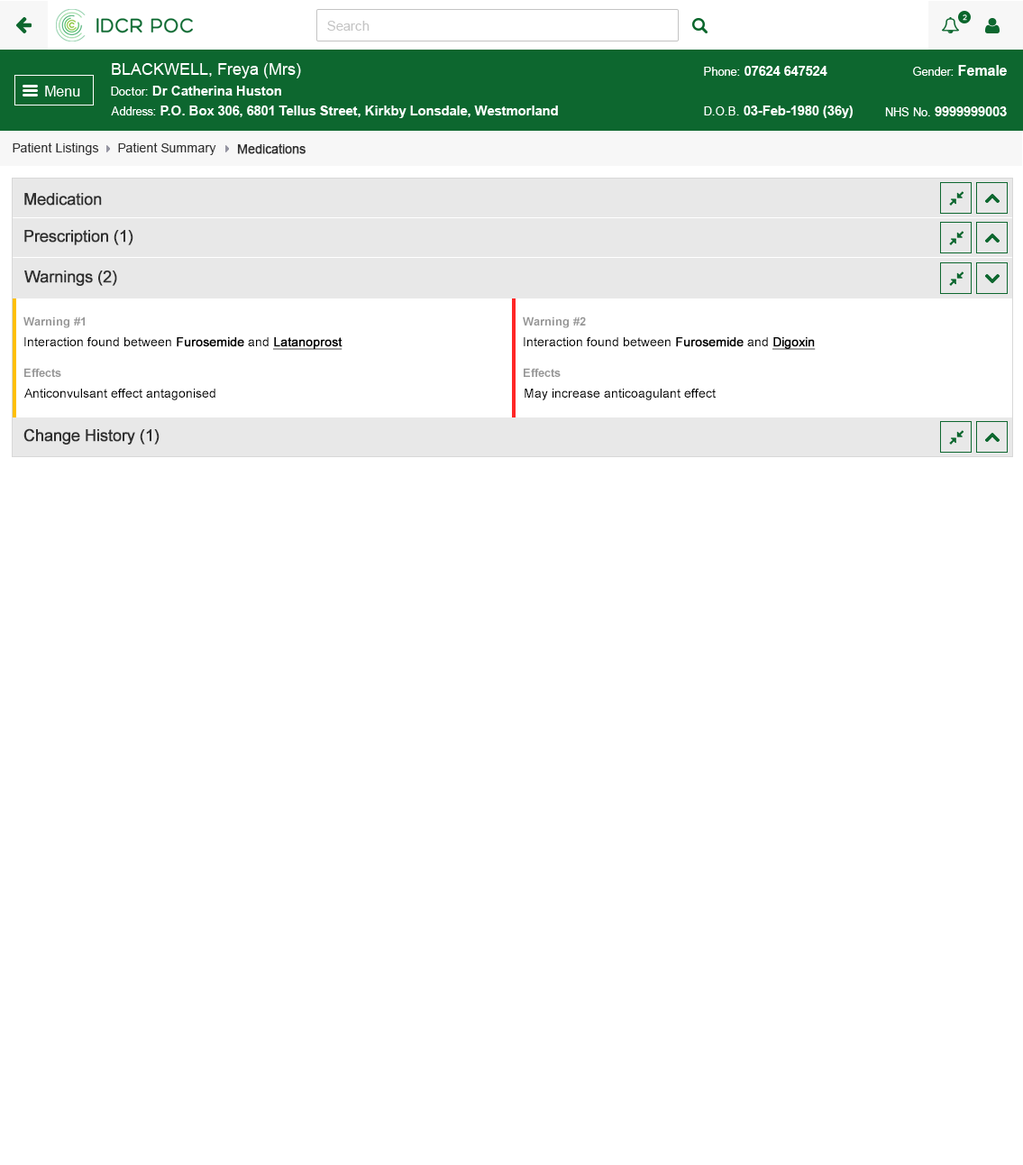
<style>
.page{position:relative;width:1023px;height:1165px;background:#ffffff}
.page>*{position:absolute;margin:0}
.t1{font:12.6px "ArialMT";color:#313131}
.t2{font:12.6px "ArialMT";color:#313131;font-weight:bold}
.t3{font:16.2px "ArialMT";color:#303030;font-weight:bold}
.t4{font:11.7px "Arial-BoldMT";color:#959595}
.t5{font:12.6px "ArialMT";color:#000000}
.t6{font:12.6px "ArialMT";color:#000000;font-weight:bold}
.t7{font:12.6px "ArialMT";color:#000000;font-weight:bold;text-decoration:underline}
</style>
<div class="page">
<p class="t1" style="left:13px;top:142px;width:86px;height:13px">Patient Listings</p>
<p class="t1" style="left:118px;top:142px;width:98px;height:13px">Patient Summary</p>
<p class="t2" style="left:237px;top:143px;width:69px;height:11px">Medications</p>
<p class="t3" style="left:24px;top:193px;width:78px;height:13px">Medication</p>
<p class="t3" style="left:24px;top:230px;width:109px;height:15px">Prescription (1)</p>
<p class="t3" style="left:24px;top:271px;width:93px;height:15px">Warnings (2)</p>
<p class="t4" style="left:23px;top:317px;width:62px;height:11px">Warning #1</p>
<p class="t4" style="left:523px;top:317px;width:63px;height:11px">Warning #2</p>
<p class="t5" style="left:24px;top:337px;width:319px;height:13px">Interaction found between <span class="t6">Furosemide</span> and <span class="t7">Latanoprost</span></p>
<p class="t5" style="left:524px;top:337px;width:292px;height:13px">Interaction found between <span class="t6">Furosemide</span> and <span class="t7">Digoxin</span></p>
<p class="t4" style="left:24px;top:368px;width:37px;height:9px">Effects</p>
<p class="t4" style="left:524px;top:368px;width:37px;height:9px">Effects</p>
<p class="t5" style="left:24px;top:389px;width:192px;height:11px">Anticonvulsant effect antagonised</p>
<p class="t5" style="left:525px;top:389px;width:191px;height:11px">May increase anticoagulant effect</p>
<p class="t3" style="left:23px;top:428px;width:137px;height:17px">Change History (1)</p>
</div>
